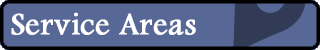
<style>
.page{position:relative;width:320px;height:50px;background:#576796}
.page>*{position:absolute;margin:0}
.t1{font:32px "FootlightMTLight";color:#ffffff;font-weight:bold}
</style>
<div class="page">
<p class="t1" style="left:11px;top:12px;width:185px;height:23px">Service Areas</p>
</div>
